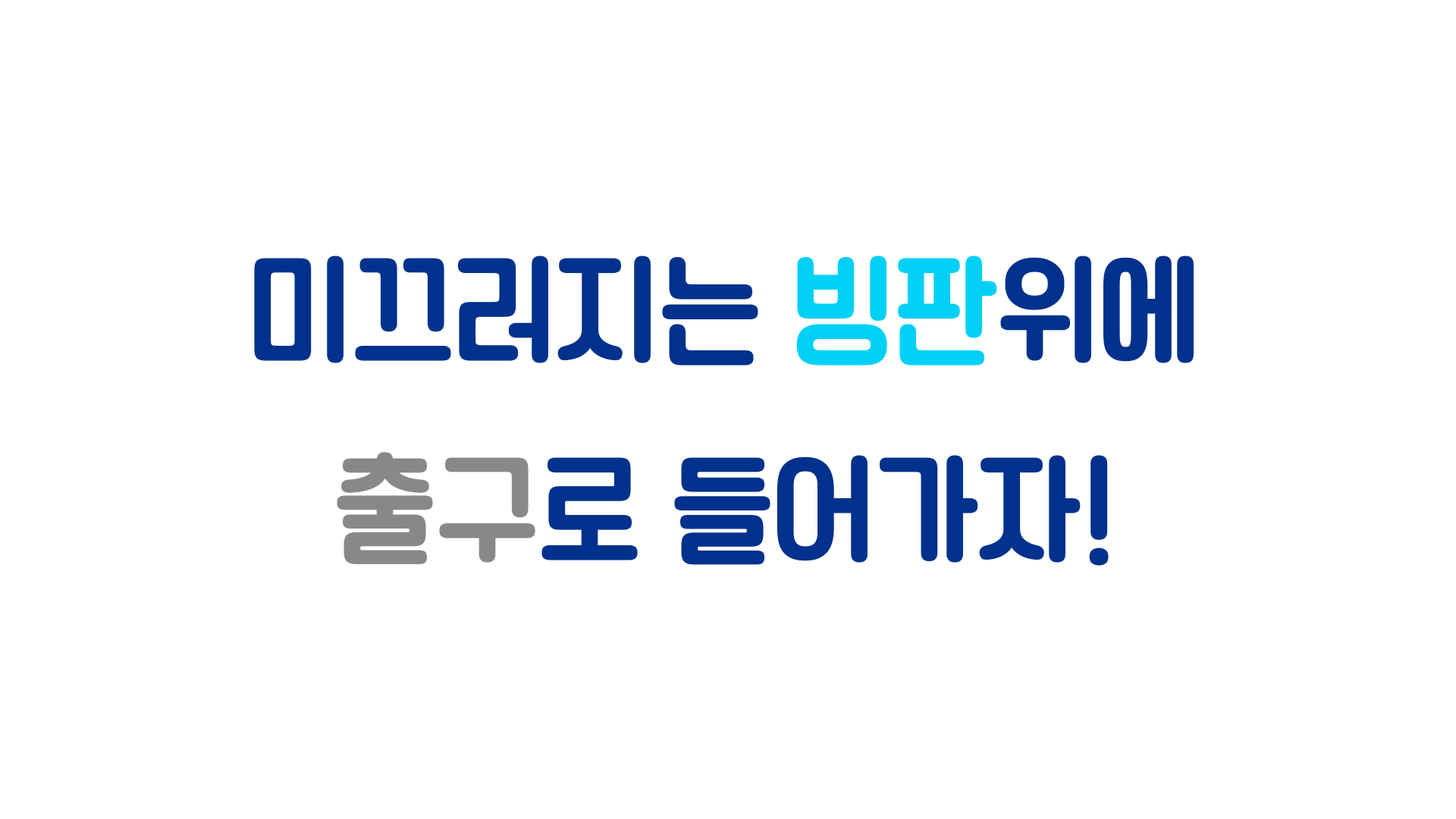
<style>
.page{position:relative;width:1456px;height:819px;background:#ffffff}
.page>*{position:absolute;margin:0}
.t1{font:113.7px "TTChungchunsidaeR";color:#00318c}
.t2{font:113.7px "TTChungchunsidaeR";color:#00d0f6}
.t3{font:113.7px "TTChungchunsidaeR";color:#878889}
</style>
<div class="page">
<p class="t1" style="left:254px;top:256px;width:940px;height:310px;text-align:center">미끄러지는 <span class="t2">빙판</span>위에<br><span class="t3">출구</span>로 들어가자!</p>
</div>
